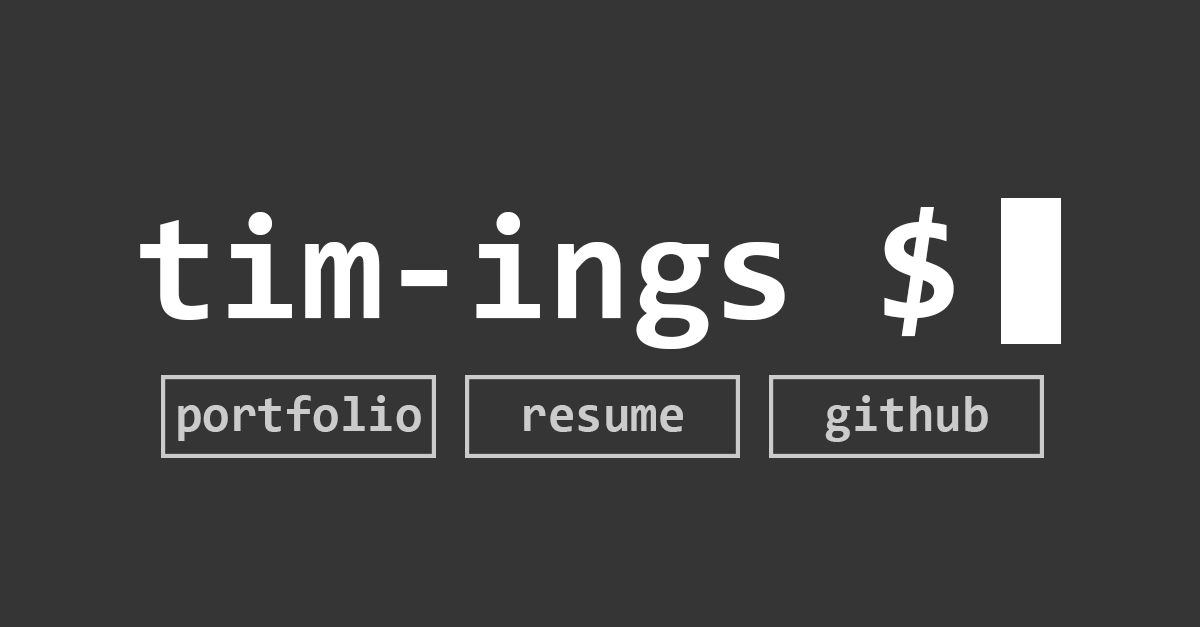
<style>
.page{position:relative;width:1200px;height:627px;background:#353535}
.page>*{position:absolute;margin:0}
.t1{font:150px "Consolas-Bold";color:#ffffff}
.t2{font:50px "Consolas-Bold";color:#cbcbcb}
</style>
<div class="page">
<p class="t1" style="left:140px;top:207px;width:814px;height:142px">tim-ings $</p>
<p class="t2" style="left:178px;top:395px;width:243px;height:46px">portfolio</p>
<p class="t2" style="left:825px;top:395px;width:163px;height:47px">github</p>
<p class="t2" style="left:524px;top:405px;width:159px;height:27px">resume</p>
</div>
